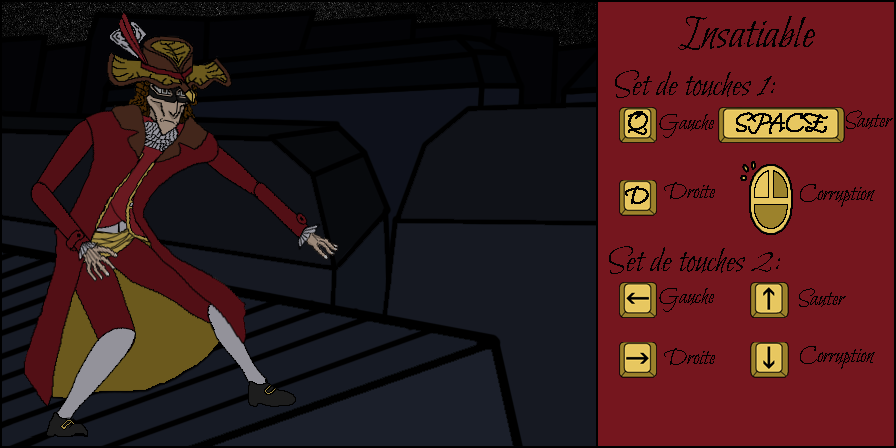
<style>
.page{position:relative;width:896px;height:448px;background:#75161e}
.page>*{position:absolute;margin:0}
.t1{font:48px "BilboSwashCaps-Regular";color:#000000}
.t2{font:36px "BilboSwashCaps-Regular";color:#000000}
.t3{font:24px "BilboSwashCaps-Regular";color:#000000}
</style>
<div class="page">
<p class="t1" style="left:678px;top:16px;width:137px;height:34px">Insatiable</p>
<p class="t2" style="left:615px;top:70px;width:160px;height:28px">Set de touches 1:</p>
<p class="t3" style="left:846px;top:110px;width:47px;height:19px">Sauter</p>
<p class="t3" style="left:659px;top:114px;width:55px;height:24px">Gauche</p>
<p class="t3" style="left:664px;top:182px;width:51px;height:17px">Droite</p>
<p class="t3" style="left:800px;top:184px;width:75px;height:23px">Corruption</p>
<p class="t2" style="left:609px;top:246px;width:171px;height:28px">Set de touches 2:</p>
<p class="t3" style="left:659px;top:288px;width:55px;height:24px">Gauche</p>
<p class="t3" style="left:799px;top:288px;width:47px;height:19px">Sauter</p>
<p class="t3" style="left:664px;top:348px;width:51px;height:17px">Droite</p>
<p class="t3" style="left:800px;top:346px;width:75px;height:23px">Corruption</p>
</div>
